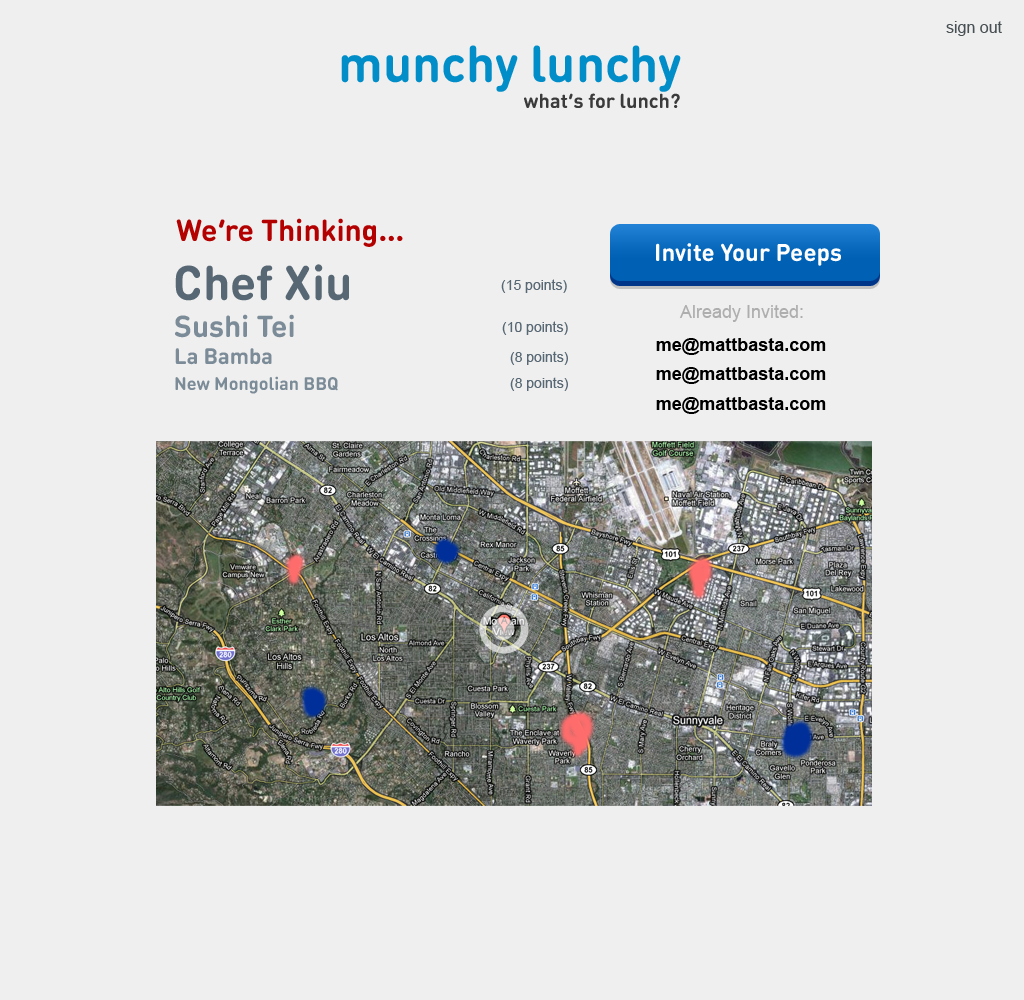
<style>
.page{position:relative;width:1024px;height:1000px;background:#efefef}
.page>*{position:absolute;margin:0}
.t1{font:16px "ArialMT";color:#485053}
.t2{font:51px "DINRoundOT-Bold";color:#008dc8}
.t3{font:20px "DINRoundOT-Bold";color:#3b3b3b}
.t4{font:30px "DINRoundOT-Bold";color:#b30000}
.t5{font:24px "DINRoundOT-Bold";color:#ffffff}
.t6{font:48px "DINRoundOT-Bold";color:#576773}
.t7{font:14px "ArialMT";color:#576773}
.t8{font:18px "ArialMT";color:#aeaeae}
.t9{font:30px "DINRoundOT-Bold";color:#7b8c98}
.t10{font:18px "Arial-BoldMT";color:#000000}
.t11{font:22px "DINRoundOT-Bold";color:#7b8c98}
.t12{font:18px "DINRoundOT-Bold";color:#7b8c98}
</style>
<div class="page">
<p class="t1" style="left:946px;top:21px;width:56px;height:15px">sign out</p>
<p class="t2" style="left:341px;top:45px;width:340px;height:47px">munchy lunchy</p>
<p class="t3" style="left:524px;top:93px;width:156px;height:15px">what’s for lunch?</p>
<p class="t4" style="left:176px;top:218px;width:227px;height:29px">We’re Thinking...</p>
<p class="t5" style="left:656px;top:243px;width:185px;height:23px">Invite Your Peeps</p>
<p class="t6" style="left:175px;top:264px;width:174px;height:37px">Chef Xiu</p>
<p class="t7" style="left:501px;top:279px;width:66px;height:14px">(15 points)</p>
<p class="t8" style="left:679px;top:305px;width:124px;height:17px">Already Invited:</p>
<p class="t9" style="left:175px;top:314px;width:119px;height:24px">Sushi Tei</p>
<p class="t7" style="left:502px;top:321px;width:66px;height:14px">(10 points)</p>
<p class="t10" style="left:656px;top:338px;width:170px;height:17px">me@mattbasta.com</p>
<p class="t11" style="left:175px;top:348px;width:97px;height:17px">La Bamba</p>
<p class="t7" style="left:510px;top:351px;width:58px;height:14px">(8 points)</p>
<p class="t12" style="left:175px;top:376px;width:163px;height:18px">New Mongolian BBQ</p>
<p class="t7" style="left:510px;top:377px;width:58px;height:14px">(8 points)</p>
<p class="t10" style="left:656px;top:367px;width:170px;height:17px">me@mattbasta.com</p>
<p class="t10" style="left:656px;top:397px;width:170px;height:17px">me@mattbasta.com</p>
</div>
